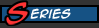
<style>
.page{position:relative;width:99px;height:28px;background:#333333}
.page>*{position:absolute;margin:0}
.t1{font:10.3px "AnimeAce2.0BB-Bold";color:#ffffff}
</style>
<div class="page">
<p class="t1" style="left:30px;top:8px;width:41px;height:11px">eries</p>
</div>
